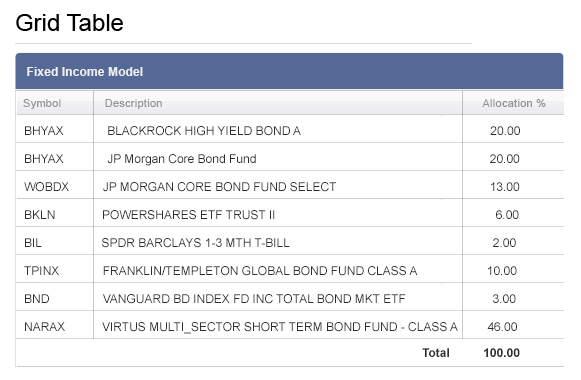
<style>
.page{position:relative;width:581px;height:380px;background:#ffffff}
.page>*{position:absolute;margin:0}
.t1{font:24px/28px "ArialMT";color:#000000}
.t2{font:12px "Arial-BoldMT";letter-spacing:0.01em;color:#f0f0f0}
.t3{font:11px "ArialMT";letter-spacing:0.025em;color:#949494}
.t4{font:12px "ArialMT";color:#2e2e2e}
.t5{font:12px/28px "ArialMT";color:#2e2e2e}
.t6{font:12px "Arial-BoldMT";color:#2e2e2e}
</style>
<div class="page">
<p class="t1" style="left:16px;top:14px;width:107px;height:17px">Grid Table<br><br><br>2</p>
<p class="t2" style="left:27px;top:67px;width:116px;height:9px">Fixed Income Model</p>
<p class="t3" style="left:23px;top:99px;width:523px;height:10px">Symbol             Description                                                                                                Allocation %</p>
<p class="t4" style="left:25px;top:126px;width:495px;height:10px">BHYAX             BLACKROCK HIGH YIELD BOND A                                                         20.00</p>
<p class="t5" style="left:24px;top:154px;width:496px;height:180px">BHYAX             JP Morgan Core Bond Fund                                                                      20.00<br>WOBDX          JP MORGAN CORE BOND FUND SELECT                                              13.00<br>BKLN              POWERSHARES ETF TRUST II                                                                  6.00<br>BIL                  SPDR BARCLAYS 1-3 MTH T-BILL                                                             2.00<br>TPINX             FRANKLIN/TEMPLETON GLOBAL BOND FUND CLASS A                     10.00<br>BND                VANGUARD BD INDEX FD INC TOTAL BOND MKT ETF                          3.00<br>NARAX           VIRTUS MULTI_SECTOR SHORT TERM BOND FUND - CLASS A         46.00</p>
<p class="t6" style="left:422px;top:348px;width:98px;height:9px">Total          100.00</p>
</div>
